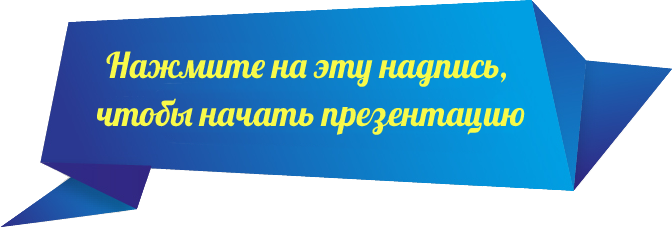
<style>
.page{position:relative;width:672px;height:228px;background:#ffffff}
.page>*{position:absolute;margin:0}
.t1{font:35.4px/47.9px "Lobster";color:#f8fa4a}
</style>
<div class="page">
<p class="t1" style="left:97px;top:51px;width:428px;height:84px;text-align:center">Нажмите на эту надпись, <br>чтобы начать презентацию</p>
</div>
